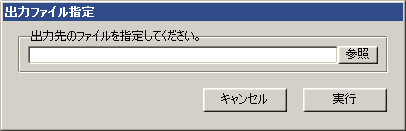
<style>
.page{position:relative;width:406px;height:131px;background:#d4d0c8}
.page>*{position:absolute;margin:0}
.t1{font:12px "MS-UIGothic";color:#ffffff;font-weight:bold}
.t2{font:12px "MS-UIGothic";color:#000000}
</style>
<div class="page">
<p class="t1" style="left:5px;top:6px;width:89px;height:11px">出力ファイル指定</p>
<p class="t2" style="left:31px;top:30px;width:168px;height:11px">出力先のファイルを指定してください。</p>
<p class="t2" style="left:346px;top:48px;width:23px;height:11px">参照</p>
<p class="t2" style="left:221px;top:93px;width:46px;height:11px">キャンセル</p>
<p class="t2" style="left:333px;top:93px;width:23px;height:11px">実行</p>
</div>
